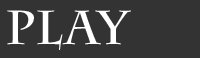
<style>
.page{position:relative;width:200px;height:58px;background:#333333}
.page>*{position:absolute;margin:0}
.t1{font:47.5px "CharlemagneStd-Bold";color:#ffffff}
</style>
<div class="page">
<p class="t1" style="left:7px;top:10px;width:124px;height:40px">PLAY</p>
</div>
